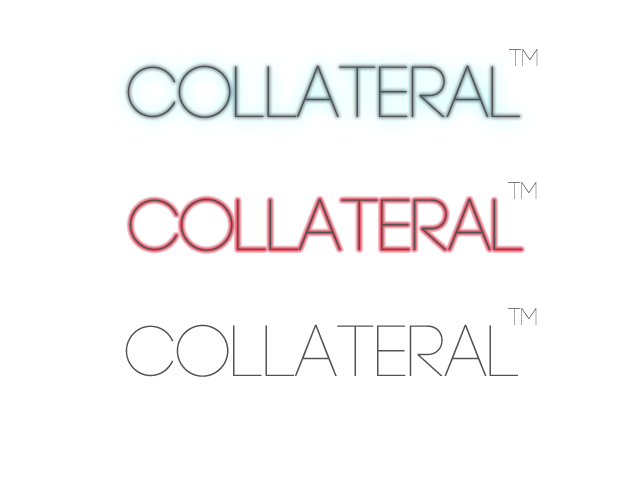
<style>
.page{position:relative;width:640px;height:480px;background:#ffffff}
.page>*{position:absolute;margin:0}
.t1{font:24px "Code-Light";letter-spacing:-0.005em}
.t2{font:72px "Code-Light";letter-spacing:-0.005em;color:#535353}
</style>
<div class="page">
<p class="t1" style="left:509px;top:49px;width:29px;height:17px">tm</p>
<p class="t2" style="left:127px;top:65px;width:393px;height:53px">Collateral</p>
<p class="t1" style="left:508px;top:182px;width:29px;height:17px">tm</p>
<p class="t2" style="left:129px;top:198px;width:393px;height:53px">Collateral</p>
<p class="t1" style="left:508px;top:308px;width:29px;height:17px">tm</p>
<p class="t2" style="left:125px;top:324px;width:393px;height:53px">Collateral</p>
</div>
